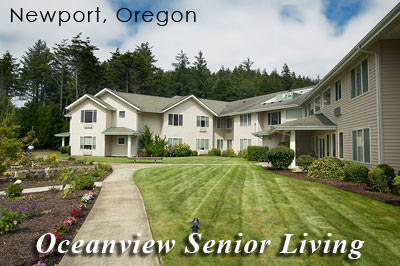
<style>
.page{position:relative;width:400px;height:266px}
.page>*{position:absolute;margin:0}
.t1{font:20.4px "CenturyGothic";letter-spacing:0.05em;color:#000000}
.t2{font:28.6px "TimesNewRomanPS-BoldItalicMT";letter-spacing:0.05em;color:#ffffff}
</style>
<div class="page">
<p class="t1" style="left:10px;top:7px;width:186px;height:19px">Newport, Oregon</p>
<p class="t2" style="left:36px;top:233px;width:329px;height:26px">Oceanview Senior Living</p>
</div>
